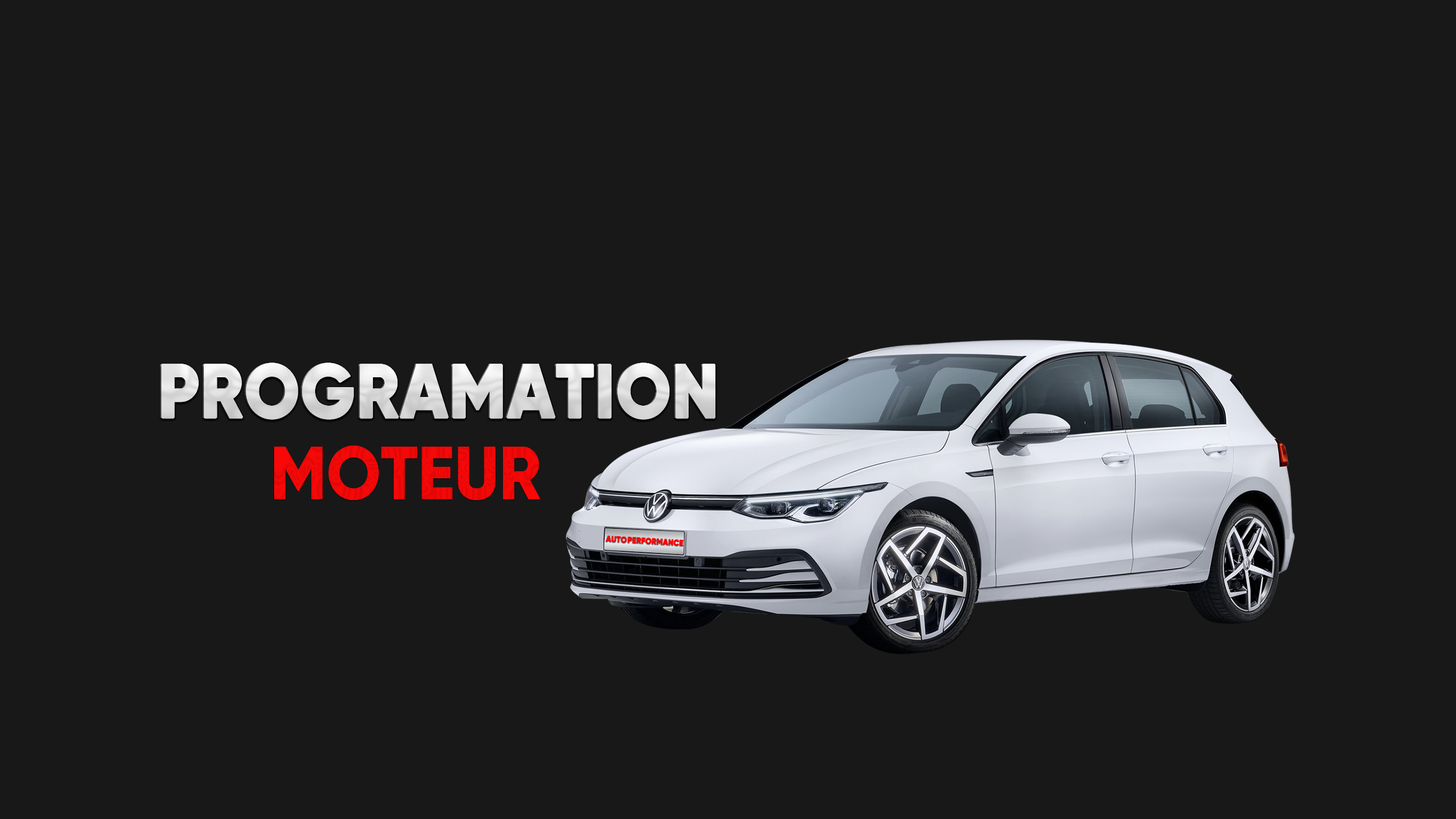
<style>
.page{position:relative;width:1456px;height:819px;background:#181818}
.page>*{position:absolute;margin:0}
.t1{font:74.9px "Gilroy-ExtraBold";color:#dcdcdc;font-weight:bold;scale:0.92 1}
.t2{font:74.9px "Gilroy-ExtraBold";color:#dddddd;font-weight:bold;scale:0.92 1}
.t3{font:74.9px "Gilroy-ExtraBold";color:#f00808;scale:0.92 1}
.t4{font:8.3px "Gilroy-ExtraBold";color:#f90808;font-weight:bold;scale:0.92 1}
</style>
<div class="page">
<p class="t1" style="left:160px;top:363px;width:554px;height:57px">PROGRAMATION</p>
<p class="t2" style="left:161px;top:363px;width:554px;height:57px">PROGRAMATION</p>
<p class="t2" style="left:161px;top:363px;width:554px;height:57px">PROGRAMATION</p>
<p class="t2" style="left:161px;top:363px;width:554px;height:57px">PROGRAMATION</p>
<p class="t2" style="left:161px;top:363px;width:554px;height:57px">PROGRAMATION</p>
<p class="t2" style="left:161px;top:363px;width:554px;height:57px">PROGRAMATION</p>
<p class="t2" style="left:161px;top:363px;width:554px;height:57px">PROGRAMATION</p>
<p class="t3" style="left:274px;top:446px;width:267px;height:54px">MOTEUR</p>
<p class="t4" style="left:606px;top:535px;width:21px;height:8px;rotate:4deg">AUTO</p>
<p class="t4" style="left:627px;top:536px;width:57px;height:10px;rotate:3deg">PERFORMANCE</p>
</div>
